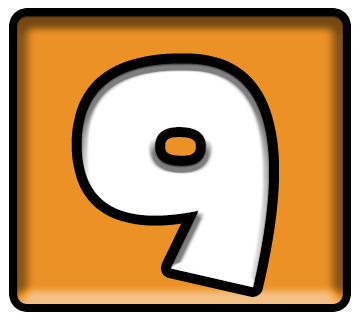
<style>
.page{position:relative;width:360px;height:320px;background:#ec9126}
.page>*{position:absolute;margin:0}
.t1{font:332.2px "Funhouse";color:#ffffff;scale:0.89 1}
</style>
<div class="page">
<p class="t1" style="left:81px;top:63px;width:188px;height:225px;rotate:2deg">9</p>
</div>
